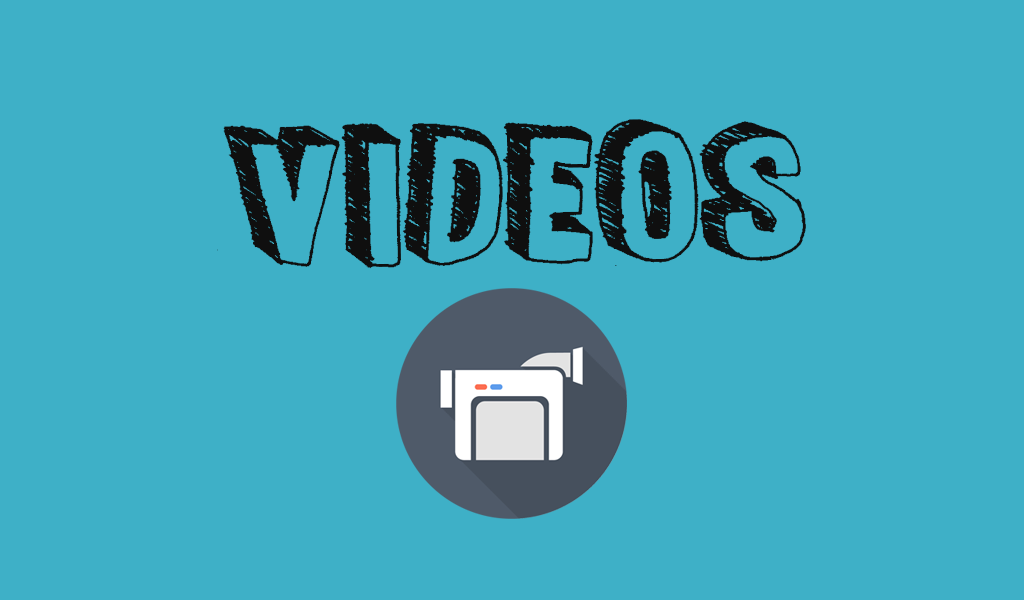
<style>
.page{position:relative;width:1024px;height:600px;background:#3eb0c7}
.page>*{position:absolute;margin:0}
.t1{font:135.8px "FunSized";color:#0f0f0f;scale:1.03 1}
</style>
<div class="page">
<p class="t1" style="left:217px;top:119px;width:589px;height:150px;rotate:-1deg">Videos</p>
</div>
